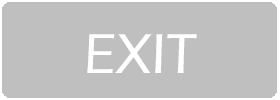
<style>
.page{position:relative;width:280px;height:100px;background:#bfbfbf}
.page>*{position:absolute;margin:0}
.t1{font:58.3px "ErasITC-Medium";color:#ffffff}
</style>
<div class="page">
<p class="t1" style="left:87px;top:34px;width:110px;height:39px">EXIT</p>
</div>
